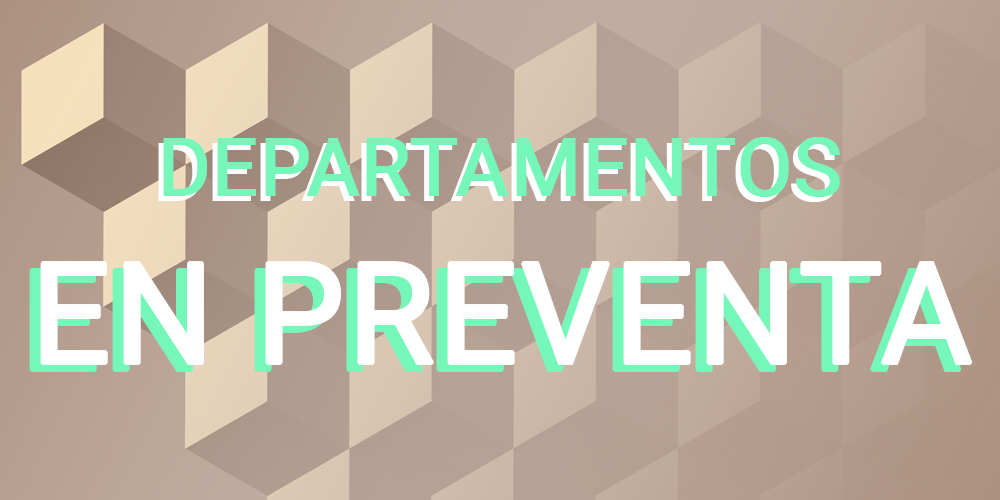
<style>
.page{position:relative;width:1000px;height:500px}
.page>*{position:absolute;margin:0}
.t1{font:80px "Roboto-Regular";color:#74f7b8;font-weight:bold}
.t2{font:80px "Roboto-Regular";font-weight:bold}
.t3{font:140px "Roboto-Regular";font-weight:bold}
.t4{font:140px "Roboto-Regular";color:#ffffff;font-weight:bold}
.t5{font:80px "Roboto-Regular";color:#ffffff;font-weight:bold}
</style>
<div class="page">
<p class="t1" style="left:163px;top:137px;width:677px;height:60px">DEPARTAMENTOS</p>
<p class="t2" style="left:158px;top:142px;width:677px;height:60px">DEPARTAMENTOS</p>
<p class="t3" style="left:29px;top:268px;width:933px;height:104px"><span class="t2"><br></span>EN PREVENTA</p>
<p class="t4" style="left:40px;top:261px;width:933px;height:104px"><span class="t5"><br></span>EN PREVENTA</p>
</div>
